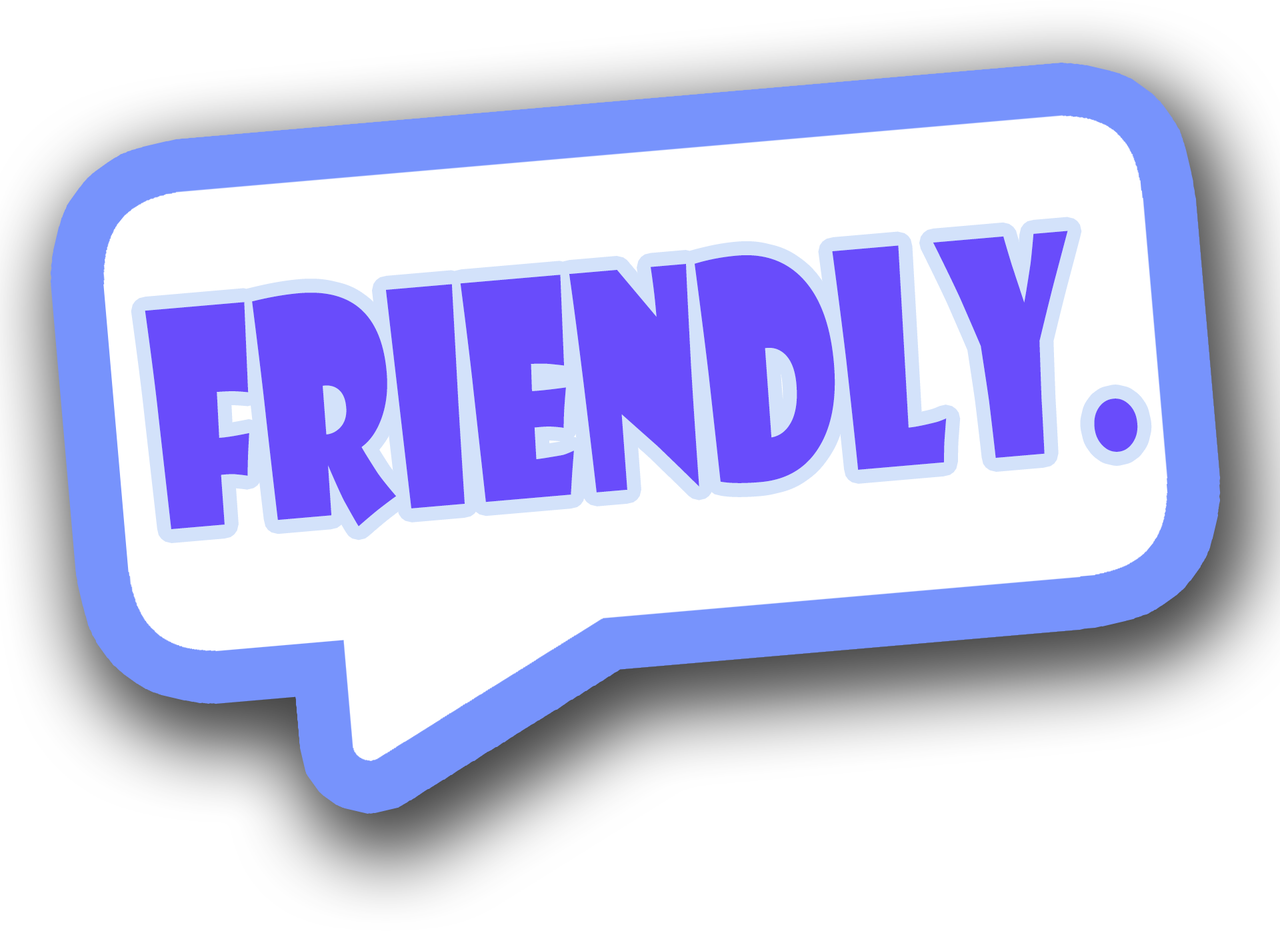
<style>
.page{position:relative;width:1280px;height:931px;background:#ffffff}
.page>*{position:absolute;margin:0}
.t1{font:293.1px "ShowcardGothic-Reg";letter-spacing:0.005em;color:#694cfb;scale:0.67 1}
</style>
<div class="page">
<p class="t1" style="left:145px;top:231px;width:993px;height:298px;rotate:-5deg">FRIENDLY.</p>
</div>
